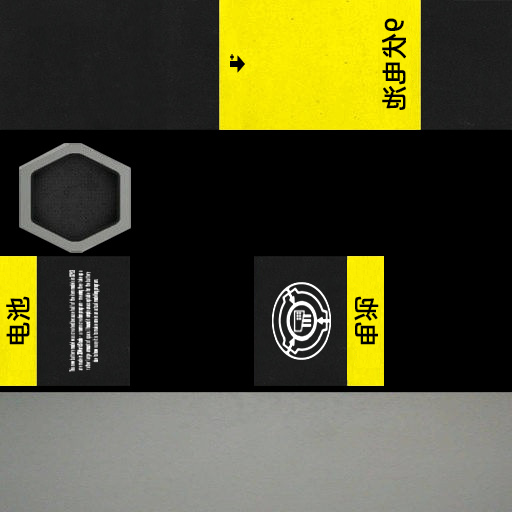
<style>
.page{position:relative;width:512px;height:512px;background:#000000}
.page>*{position:absolute;margin:0}
.t1{font:26px "AlibabaPuHuiTiR";color:#000000;font-weight:bold}
</style>
<div class="page">
<p class="t1" style="left:382px;top:18px;width:24px;height:92px;rotate:90deg">9伏电池</p>
<p class="t1" style="left:6px;top:296px;width:24px;height:49px;rotate:-90deg">电池</p>
<p class="t1" style="left:354px;top:296px;width:25px;height:49px;rotate:-90deg">电池</p>
</div>
